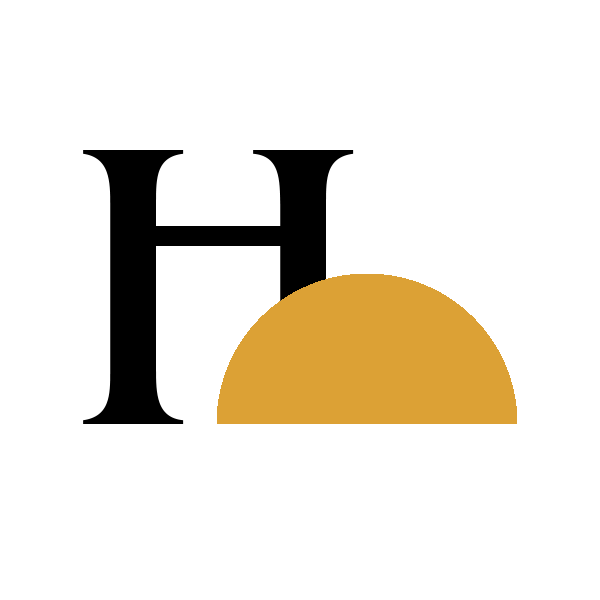
<style>
.page{position:relative;width:600px;height:600px;background:#ffffff}
.page>*{position:absolute;margin:0}
.t1{font:416.7px "BenguiatProITC-Book";color:#000000;text-transform:uppercase}
</style>
<div class="page">
<p class="t1" style="left:83px;top:150px;width:271px;height:274px">H</p>
</div>
